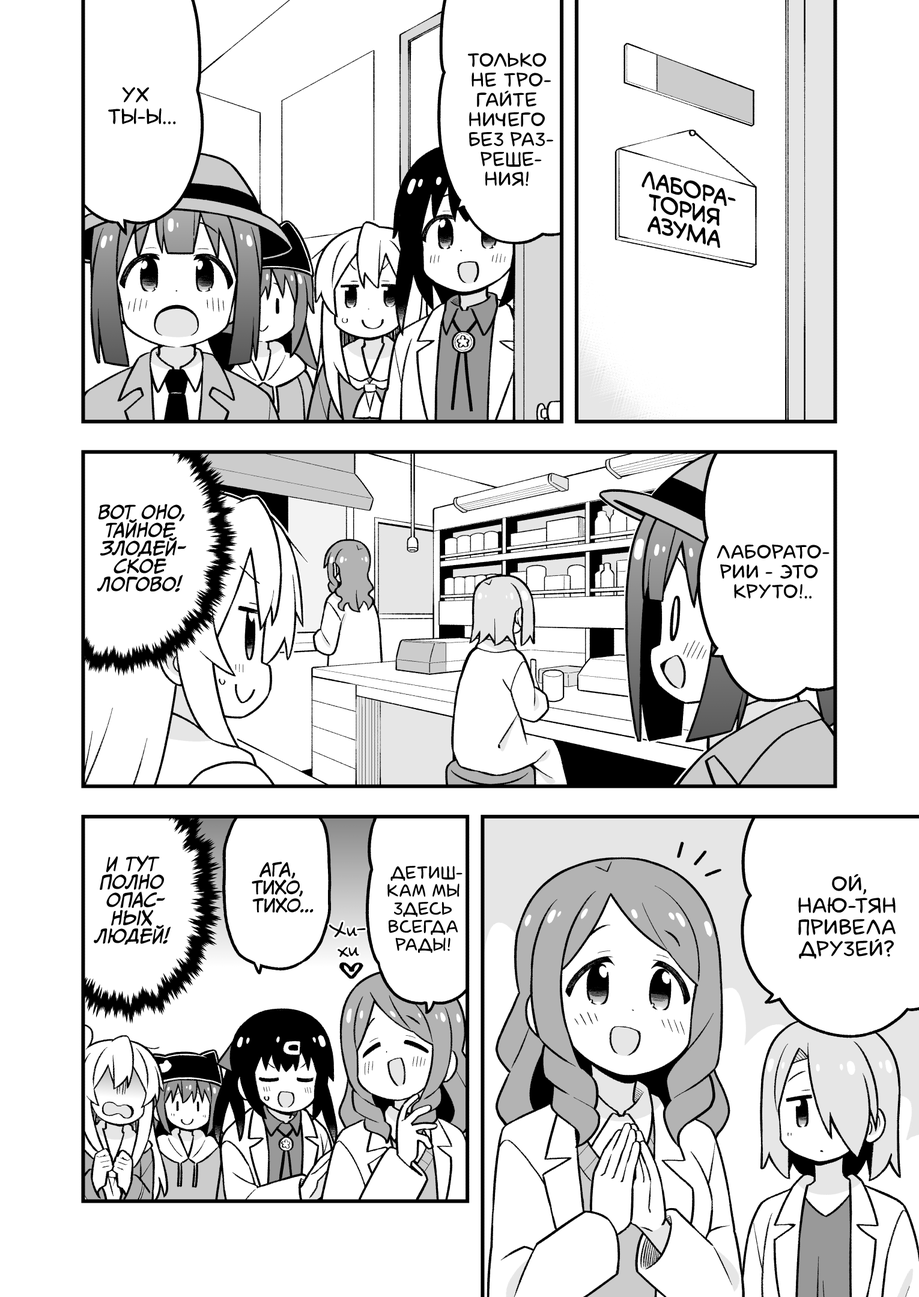
<style>
.page{position:relative;width:919px;height:1297px;background:#ffffff}
.page>*{position:absolute;margin:0}
.t1{font:19.8px "laCartoonerie";color:#000000;text-transform:uppercase}
.t2{font:21.6px "laCartoonerie";color:#000000;text-transform:uppercase}
.t3{font:21.6px "v_CCMonologous";color:#000000;text-transform:uppercase}
.t4{font:18px "CCMeanwhile";color:#000000;text-transform:uppercase;font-style:italic}
.t5{font:18px "KuraiVoice2";color:#000000;text-transform:uppercase}
.t6{font:18px "laCartoonerie";color:#000000;text-transform:uppercase}
.t7{font:19.8px "v_Augie";color:#000000}
</style>
<div class="page">
<p class="t1" style="left:468px;top:53px;width:85px;height:133px;text-align:center">Только<br>не тро-<br>гайте<br>ничего<br>без раз-<br>реше-<br>ния!</p>
<p class="t2" style="left:108px;top:87px;width:68px;height:37px;text-align:center">Ух<br>ты-ы...</p>
<p class="t3" style="left:642px;top:171px;width:94px;height:77px;text-align:center;rotate:13deg">Лабора-<br>тория<br>Азума</p>
<p class="t4" style="left:97px;top:504px;width:89px;height:88px;text-align:center">Вот оно,<br>тайное<br>злодей-<br>ское<br>логово!</p>
<p class="t1" style="left:717px;top:544px;width:113px;height:55px;text-align:center">Лаборато-<br>рии - это<br>круто!..</p>
<p class="t4" style="left:94px;top:855px;width:77px;height:90px;text-align:center">И тут<br>полно<br>опас-<br>ных<br>людей!</p>
<p class="t5" style="left:252px;top:862px;width:62px;height:51px;text-align:center">Ага,<br>тихо,<br>тихо...</p>
<p class="t6" style="left:387px;top:866px;width:76px;height:87px;text-align:center">Детиш-<br>кам мы<br>здесь<br>всегда<br>рады!</p>
<p class="t2" style="left:798px;top:874px;width:98px;height:85px;text-align:center">Ой,<br>Наю-тян<br>привела<br>друзей?</p>
<p class="t7" style="left:329px;top:922px;width:37px;height:35px;text-align:center;rotate:-4deg">Хи-<br>хи</p>
</div>
